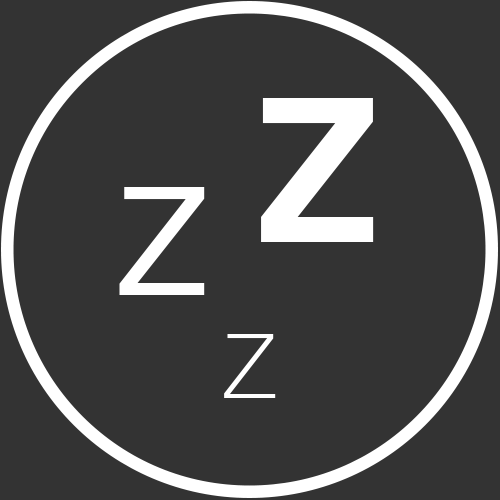
<style>
.page{position:relative;width:500px;height:500px;background:#333333}
.page>*{position:absolute;margin:0}
.t1{font:200px "Helvetica-Bold";color:#ffffff}
.t2{font:150px "Helvetica";color:#ffffff}
.t3{font:125px "HelveticaNeue-Thin";color:#ffffff}
</style>
<div class="page">
<p class="t1" style="left:261px;top:98px;width:113px;height:144px">Z</p>
<p class="t2" style="left:119px;top:187px;width:86px;height:108px">Z</p>
<p class="t3" style="left:224px;top:334px;width:52px;height:64px">z</p>
</div>
